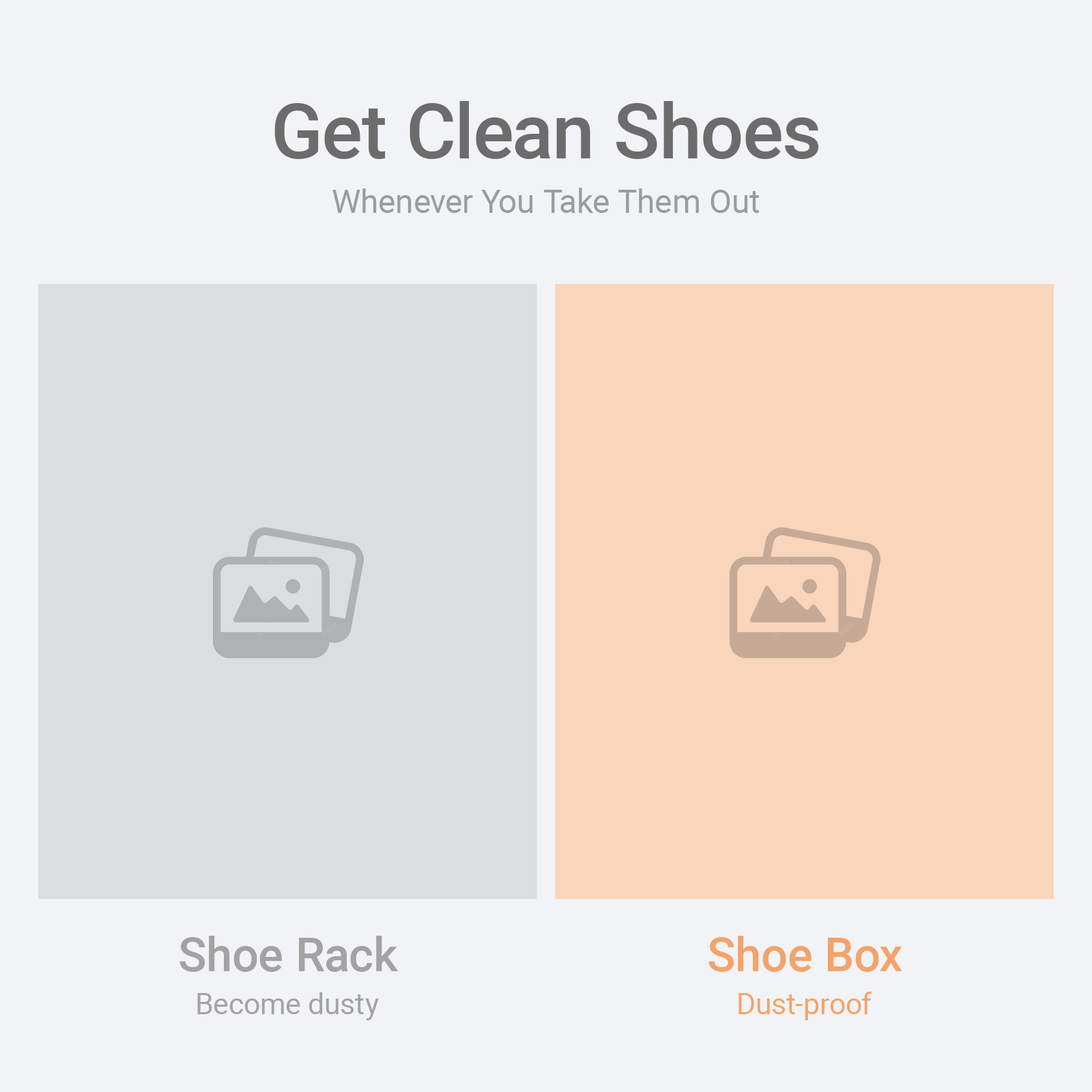
<style>
.page{position:relative;width:1092px;height:1092px;background:#f2f3f6}
.page>*{position:absolute;margin:0}
.t1{font:76.4px "Roboto-Medium";color:#6c6c6c}
.t2{font:32.8px "Roboto-Regular";color:#9b9c9d}
.t3{font:47.3px "Roboto-Medium";color:#a3a3a3}
.t4{font:47.3px "Roboto-Medium";color:#f2a46a}
.t5{font:29.1px "Roboto-Regular";color:#a3a3a3}
.t6{font:29.1px "Roboto-Regular";color:#f2a46a}
</style>
<div class="page">
<p class="t1" style="left:274px;top:101px;width:545px;height:58px">Get Clean Shoes</p>
<p class="t2" style="left:332px;top:188px;width:427px;height:25px">Whenever You Take Them Out</p>
<p class="t3" style="left:179px;top:936px;width:220px;height:36px">Shoe Rack</p>
<p class="t4" style="left:708px;top:936px;width:194px;height:36px">Shoe Box</p>
<p class="t5" style="left:197px;top:992px;width:182px;height:28px">Become dusty</p>
<p class="t6" style="left:738px;top:992px;width:134px;height:28px">Dust-proof</p>
</div>
